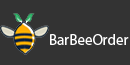
<style>
.page{position:relative;width:130px;height:65px;background:#333333}
.page>*{position:absolute;margin:0}
.t1{font:15px "MyriadPro-Regular";color:#ffffff}
</style>
<div class="page">
<p class="t1" style="left:50px;top:34px;width:79px;height:11px">BarBeeOrder</p>
</div>
